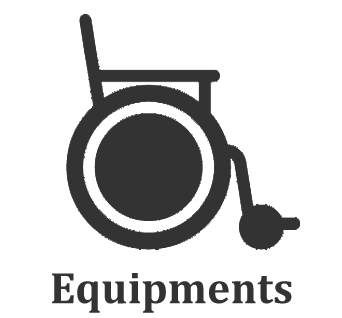
<style>
.page{position:relative;width:342px;height:318px;background:#ffffff}
.page>*{position:absolute;margin:0}
.t1{font:44.8px "Cambria-Bold";color:#333333}
</style>
<div class="page">
<p class="t1" style="left:52px;top:273px;width:240px;height:40px">Equipments</p>
</div>
